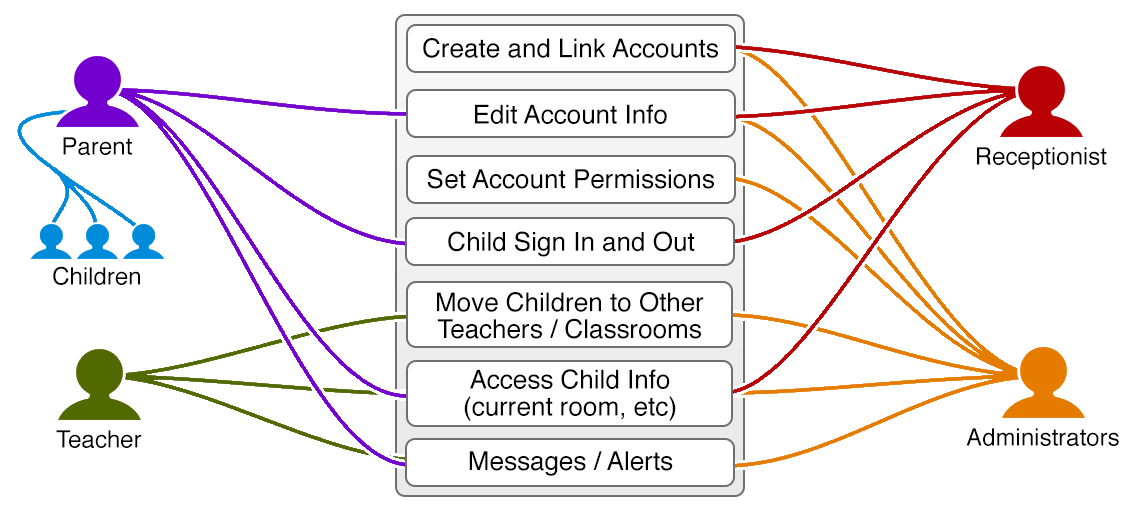
<style>
.page{position:relative;width:1135px;height:511px;background:#ffffff}
.page>*{position:absolute;margin:0}
.t1{font:26px "Helvetica";color:#000000}
.t2{font:24px "Helvetica";color:#000000}
.t3{font:26px/26.8px "Helvetica";color:#000000}
</style>
<div class="page">
<p class="t1" style="left:423px;top:38px;width:295px;height:20px">Create and Link Accounts</p>
<p class="t1" style="left:475px;top:104px;width:192px;height:20px">Edit Account Info</p>
<p class="t2" style="left:63px;top:137px;width:69px;height:18px">Parent</p>
<p class="t2" style="left:977px;top:147px;width:130px;height:23px">Receptionist</p>
<p class="t1" style="left:427px;top:168px;width:287px;height:21px">Set Account Permissions</p>
<p class="t1" style="left:448px;top:231px;width:247px;height:26px">Child Sign In and Out</p>
<p class="t2" style="left:53px;top:266px;width:87px;height:19px">Children</p>
<p class="t3" style="left:437px;top:292px;width:267px;height:47px;text-align:center">Move Children to Other<br>Teachers / Classrooms</p>
<p class="t3" style="left:464px;top:369px;width:212px;height:52px;text-align:center">Access Child Info<br>(current room, etc)</p>
<p class="t2" style="left:56px;top:430px;width:86px;height:18px">Teacher</p>
<p class="t2" style="left:966px;top:428px;width:153px;height:18px">Administrators</p>
<p class="t1" style="left:469px;top:451px;width:204px;height:25px">Messages / Alerts</p>
</div>
